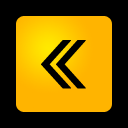
<style>
.page{position:relative;width:128px;height:128px;background:#000000}
.page>*{position:absolute;margin:0}
.t1{font:50px "MicrosoftYaHei";color:#000000;font-weight:bold;scale:2 1}
</style>
<div class="page">
<p class="t1" style="left:41px;top:40px;width:45px;height:49px">《</p>
</div>
